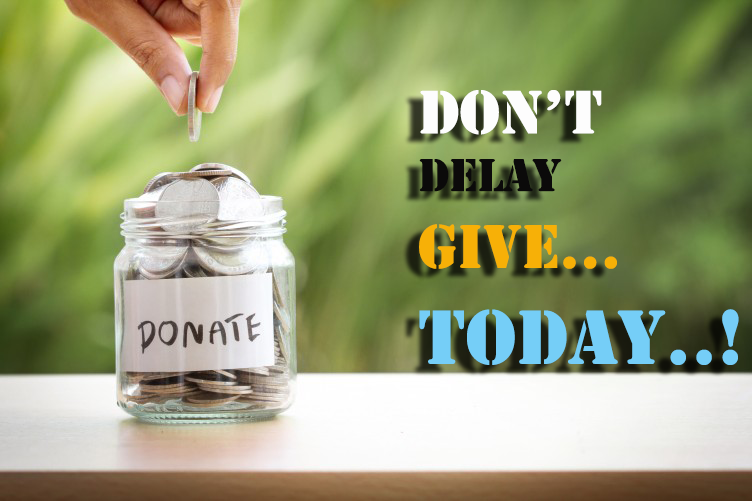
<style>
.page{position:relative;width:752px;height:501px}
.page>*{position:absolute;margin:0}
.t1{font:80px "Stencil";color:#75cef7}
.t2{font:64px "Stencil";color:#fdfdfd}
.t3{font:48px "Stencil";color:#0b0a0a}
.t4{font:64px "Stencil";color:#f7b007}
</style>
<div class="page">
<p class="t1" style="left:419px;top:90px;width:320px;height:275px"><span class="t2">don’t<br></span><span class="t3">delay<br></span><span class="t4">give...<br></span>today..!</p>
</div>
